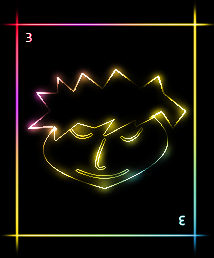
<style>
.page{position:relative;width:214px;height:258px;background:#000000}
.page>*{position:absolute;margin:0}
.t1{font:14px "Consolas";color:#ffffff}
</style>
<div class="page">
<p class="t1" style="left:26px;top:33px;width:6px;height:9px">3</p>
<p class="t1" style="left:179px;top:215px;width:6px;height:11px;rotate:180deg">3</p>
</div>
